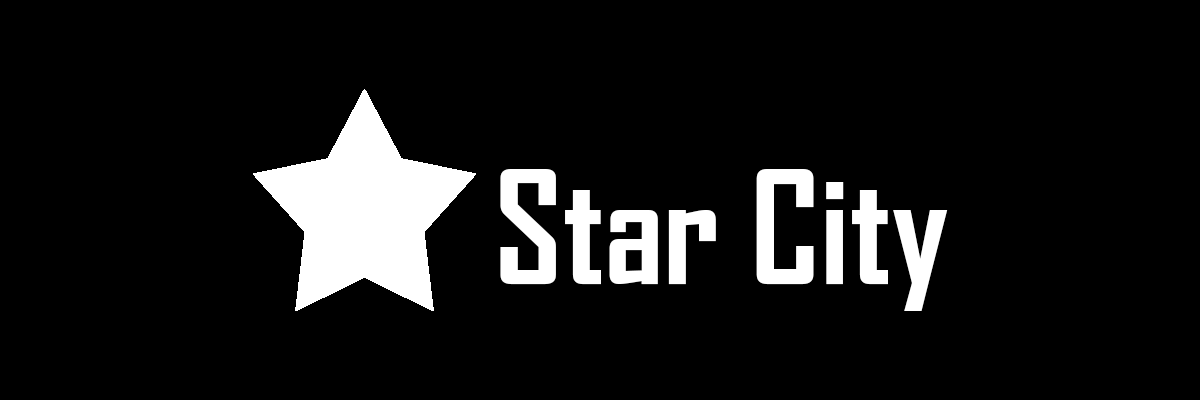
<style>
.page{position:relative;width:1200px;height:400px;background:#000000}
.page>*{position:absolute;margin:0}
.t1{font:150px "AgencyFB-Bold";color:#ffffff}
</style>
<div class="page">
<p class="t1" style="left:500px;top:169px;width:448px;height:142px">Star City</p>
</div>
